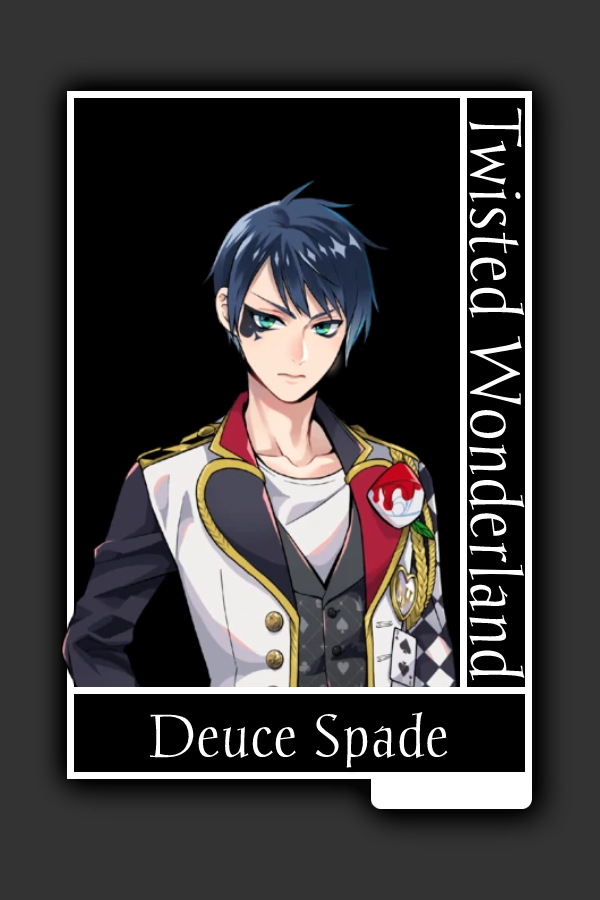
<style>
.page{position:relative;width:600px;height:900px;background:#000000}
.page>*{position:absolute;margin:0}
.t1{font:60px "Chantelli-Antiqua";color:#ffffff}
.t2{font:50px "Chantelli-Antiqua";color:#ffffff}
</style>
<div class="page">
<p class="t1" style="left:468px;top:107px;width:57px;height:574px;rotate:90deg">Twisted Wonderland</p>
<p class="t2" style="left:149px;top:712px;width:299px;height:56px">Deuce Spade</p>
</div>
